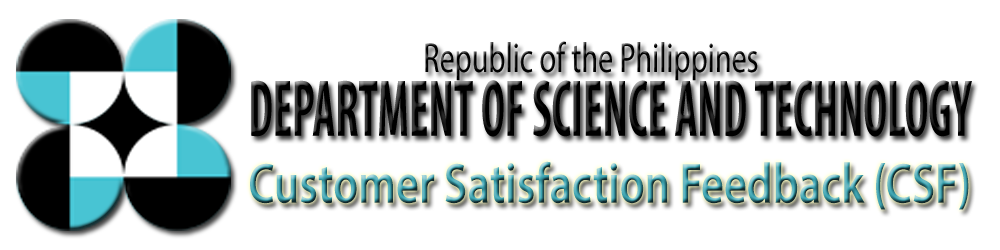
<style>
.page{position:relative;width:1000px;height:250px;background:#ffffff}
.page>*{position:absolute;margin:0}
.t1{font:42.3px "MyriadPro-Regular";color:#000000;scale:0.71 1}
.t2{font:81.1px "MyriadPro-BoldCond";color:#000000;scale:0.61 1}
.t3{font:57.2px "MyriadPro-Semibold";scale:0.78 1}
</style>
<div class="page">
<p class="t1" style="left:425px;top:41px;width:333px;height:40px">Republic of the Philippines</p>
<p class="t2" style="left:251px;top:80px;width:721px;height:57px">DEPARTMENT OF SCIENCE AND TECHNOLOGY</p>
<p class="t3" style="left:250px;top:161px;width:719px;height:49px">Customer Satisfaction Feedback (CSF)</p>
</div>
